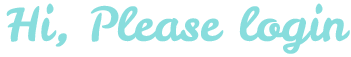
<style>
.page{position:relative;width:351px;height:57px;background:#ffffff}
.page>*{position:absolute;margin:0}
.t1{font:46.7px "LeckerliOne-Regular";color:#88dddd}
</style>
<div class="page">
<p class="t1" style="left:6px;top:3px;width:344px;height:51px">Hi, Please login</p>
</div>
